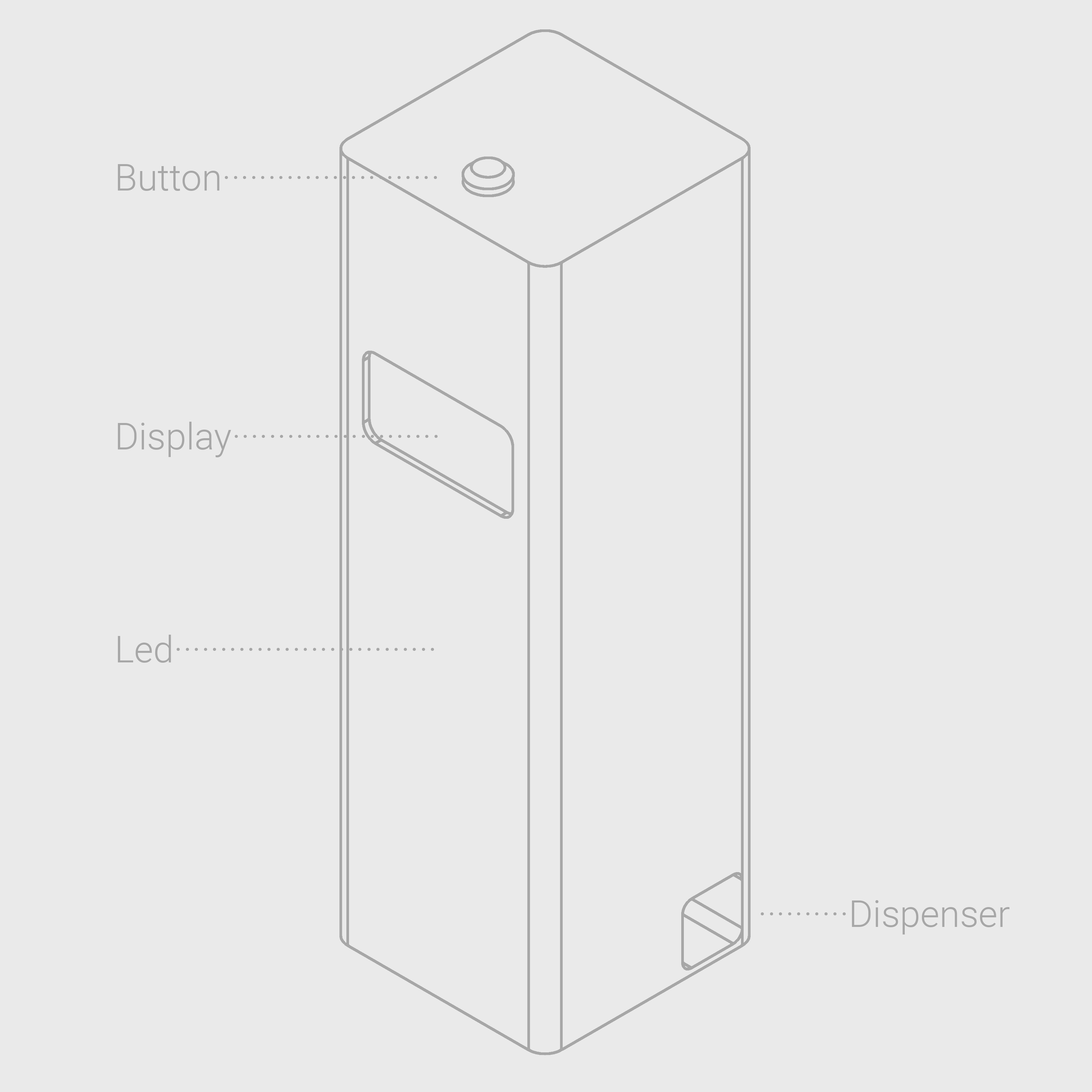
<style>
.page{position:relative;width:1092px;height:1092px;background:#eaeaea}
.page>*{position:absolute;margin:0}
.t1{font:37px "Roboto-Light";color:#a7a7a7}
</style>
<div class="page">
<p class="t1" style="left:118px;top:164px;width:319px;height:27px">Button························</p>
<p class="t1" style="left:118px;top:422px;width:320px;height:35px">Display·······················</p>
<p class="t1" style="left:118px;top:635px;width:316px;height:28px">Led·····························</p>
<p class="t1" style="left:760px;top:900px;width:250px;height:34px">··········Dispenser</p>
</div>
